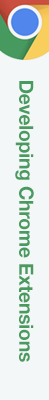
<style>
.page{position:relative;width:49px;height:400px;background:#f3f7f7}
.page>*{position:absolute;margin:0}
.t1{font:19.8px "HelveticaNeue-Bold";letter-spacing:-0.01em;color:#489a5f}
</style>
<div class="page">
<p class="t1" style="left:15px;top:81px;width:19px;height:281px;rotate:90deg">Developing Chrome Extensions</p>
</div>
